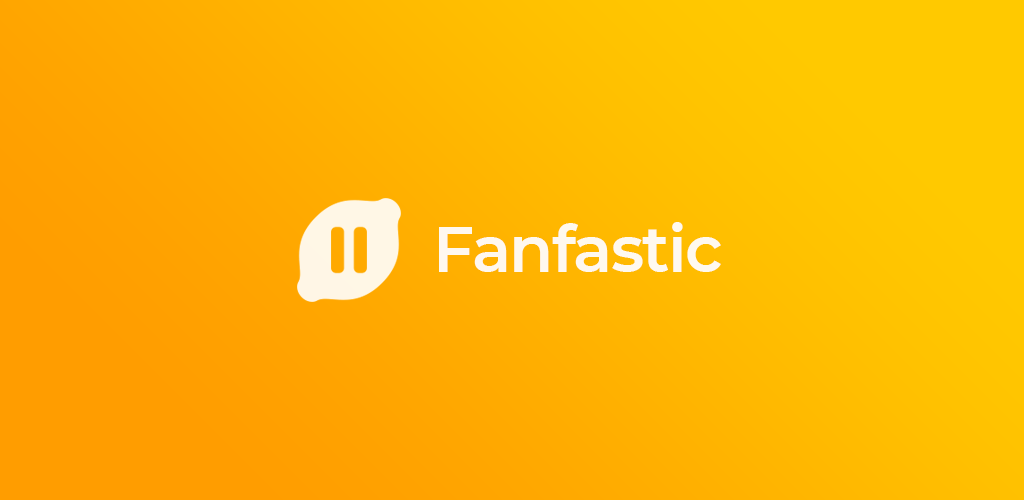
<style>
.page{position:relative;width:1024px;height:500px}
.page>*{position:absolute;margin:0}
.t1{font:64.5px "Montserrat-SemiBold";letter-spacing:-0.025em;color:#ffffff}
</style>
<div class="page">
<p class="t1" style="left:439px;top:222px;width:282px;height:50px;opacity:0.9">Fanfastic</p>
</div>
